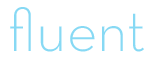
<style>
.page{position:relative;width:153px;height:64px;background:#ffffff}
.page>*{position:absolute;margin:0}
.t1{font:60px "NeutraText-Light";color:#87d9f4}
</style>
<div class="page">
<p class="t1" style="left:10px;top:7px;width:134px;height:45px">fluent</p>
</div>
